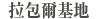
<style>
.page{position:relative;width:97px;height:19px;background:#ffffff}
.page>*{position:absolute;margin:0}
.t1{font:18px "RyuminPro-ExBold";color:#4c4843;scale:0.9 1}
</style>
<div class="page">
<p class="t1" style="left:8px;top:1px;width:81px;height:18px">拉包爾基地</p>
</div>
